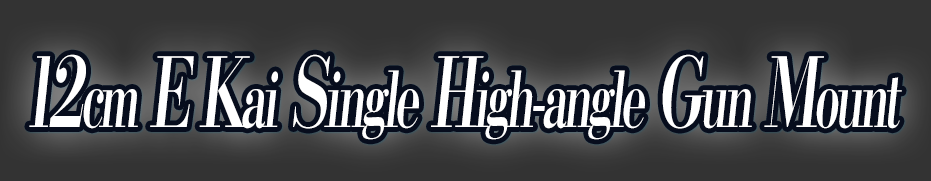
<style>
.page{position:relative;width:931px;height:181px;background:#333333}
.page>*{position:absolute;margin:0}
.t1{font:76.8px "KochoStd-Heavy";letter-spacing:-0.08em;color:#ffffff;font-style:italic;scale:0.6 1}
.t2{font:96px "KochoStd-Heavy";letter-spacing:-0.08em;color:#ffffff;font-style:italic;scale:0.6 1}
</style>
<div class="page">
<p class="t1" style="left:29px;top:54px;width:873px;height:86px"><span class="t2">12</span>cm<span class="t2"> E K</span>ai<span class="t2"> S</span>ingle<span class="t2"> H</span>igh-angle<span class="t2"> G</span>un<span class="t2"> M</span>ount</p>
</div>
